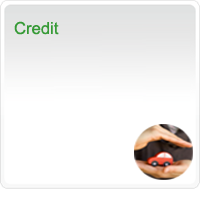
<style>
.page{position:relative;width:200px;height:200px;background:#ffffff}
.page>*{position:absolute;margin:0}
.t1{font:16.7px "ArialMT";color:#369a36}
</style>
<div class="page">
<p class="t1" style="left:14px;top:21px;width:45px;height:14px">Credit</p>
</div>
